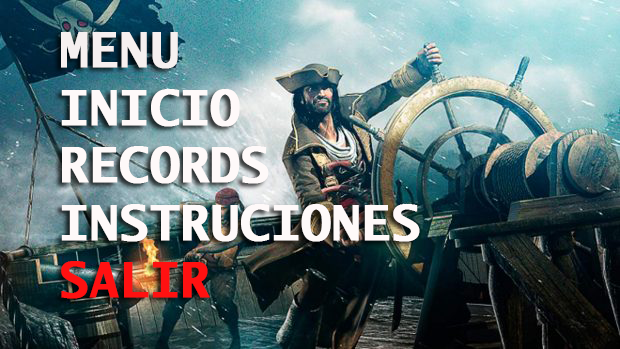
<style>
.page{position:relative;width:620px;height:349px}
.page>*{position:absolute;margin:0}
.t1{font:48px "LucidaSans-TypewriterBold";color:#fef9f9;font-weight:bold}
.t2{font:48px "LucidaSans-TypewriterBold";color:#f6f0f0;font-weight:bold}
.t3{font:48px "LucidaSans-TypewriterBold";color:#ff1111;font-weight:bold}
</style>
<div class="page">
<p class="t1" style="left:61px;top:32px;width:359px;height:267px"><span class="t2">MENU<br></span>INICIO<br>RECORDS<br>INSTRUCIONES<br><span class="t3">SALIR</span></p>
</div>
